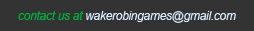
<style>
.page{position:relative;width:254px;height:31px;background:#333333}
.page>*{position:absolute;margin:0}
.t1{font:12px "Arial-ItalicMT";letter-spacing:-0.025em;color:#d9edff}
.t2{font:12px "Arial-ItalicMT";letter-spacing:-0.025em;color:#00ae3d}
</style>
<div class="page">
<p class="t1" style="left:18px;top:11px;width:218px;height:12px"><span class="t2">contact us at </span>wakerobingames@gmail.com</p>
</div>
